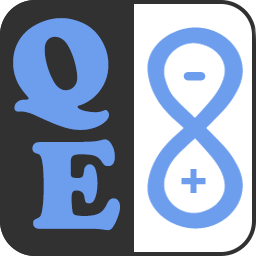
<style>
.page{position:relative;width:256px;height:256px;background:#313131}
.page>*{position:absolute;margin:0}
.t1{font:130px/122px "CooperBlack";color:#6d9eee}
</style>
<div class="page">
<p class="t1" style="left:13px;top:18px;width:107px;height:213px">Q<br> E</p>
</div>
